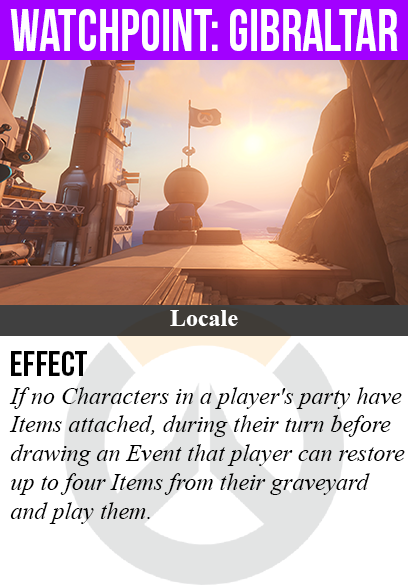
<style>
.page{position:relative;width:408px;height:585px;background:#ffffff}
.page>*{position:absolute;margin:0}
.t1{font:60px "BebasNeue";color:#ffffff;scale:0.88 1}
.t2{font:24px "TimesNewRomanPS-BoldMT";color:#ffffff}
.t3{font:36px "BebasNeue";color:#000000}
.t4{font:24px "TimesNewRomanPS-ItalicMT";color:#000000}
</style>
<div class="page">
<p class="t1" style="left:10px;top:9px;width:388px;height:42px">watchpoint: gibraltar</p>
<p class="t2" style="left:170px;top:310px;width:68px;height:16px">Locale</p>
<p class="t3" style="left:11px;top:351px;width:76px;height:25px">Effect</p>
<p class="t4" style="left:9px;top:387px;width:396px;height:137px">If no Characters in a player's party have<br>Items attached, during their turn before<br>drawing an Event that player can restore<br>up to four Items from their graveyard<br>and play them.</p>
</div>
